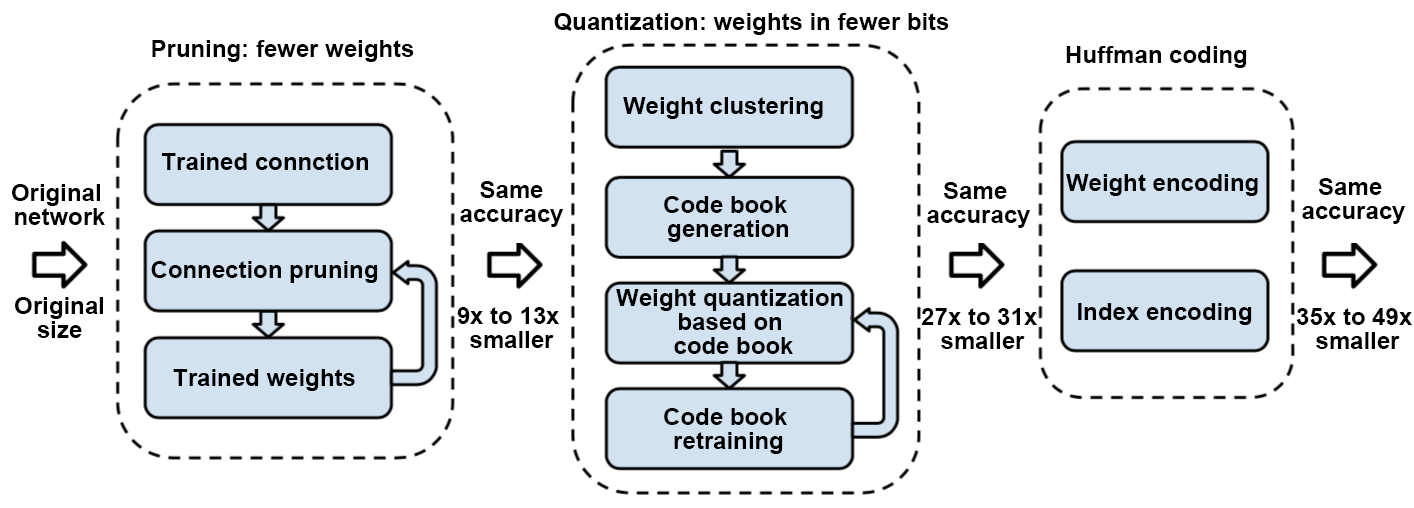
<style>
.page{position:relative;width:1414px;height:508px;background:#ffffff}
.page>*{position:absolute;margin:0}
.t1{font:12px "Arial-BoldMT";color:#000000}
.t2{font:12px/24px "Arial-BoldMT";color:#000000}
</style>
<div class="page">
<p class="t1" style="left:554px;top:13px;width:395px;height:22px;text-align:center">Quantization: weights in fewer bits</p>
<p class="t1" style="left:152px;top:40px;width:262px;height:22px;text-align:center">Pruning: fewer weights</p>
<p class="t2" style="left:1066px;top:46px;width:181px;height:22px;text-align:center">Huffman coding</p>
<p class="t1" style="left:623px;top:97px;width:200px;height:22px;text-align:center">Weight clustering</p>
<p class="t1" style="left:162px;top:153px;width:206px;height:17px">Trained connction</p>
<p class="t2" style="left:1066px;top:174px;width:192px;height:22px;text-align:center">Weight encoding</p>
<p class="t2" style="left:12px;top:184px;width:93px;height:41px;text-align:center">Original <br>network</p>
<p class="t2" style="left:460px;top:181px;width:103px;height:46px;text-align:center">Same<br>accuracy</p>
<p class="t2" style="left:927px;top:182px;width:103px;height:46px;text-align:center">Same <br>accuracy</p>
<p class="t2" style="left:1302px;top:178px;width:103px;height:46px;text-align:center">Same <br>accuracy</p>
<p class="t2" style="left:664px;top:196px;width:124px;height:46px;text-align:center">Code book <br>generation</p>
<p class="t1" style="left:151px;top:261px;width:227px;height:22px;text-align:center">Connection pruning</p>
<p class="t2" style="left:616px;top:289px;width:227px;height:65px;text-align:center">Weight quantization <br>based on <br>code book</p>
<p class="t2" style="left:15px;top:297px;width:88px;height:41px;text-align:center">Original<br>size</p>
<p class="t2" style="left:1078px;top:303px;width:174px;height:22px;text-align:center">Index encoding</p>
<p class="t2" style="left:457px;top:307px;width:102px;height:41px;text-align:center">9x to 13x <br>smaller</p>
<p class="t2" style="left:921px;top:308px;width:116px;height:41px;text-align:center">27x to 31x <br>smaller</p>
<p class="t2" style="left:1296px;top:308px;width:116px;height:41px;text-align:center">35x to 49x <br>smaller</p>
<p class="t1" style="left:173px;top:369px;width:182px;height:22px;text-align:center">Trained weights</p>
<p class="t2" style="left:664px;top:408px;width:123px;height:46px;text-align:center">Code book <br>retraining</p>
</div>
